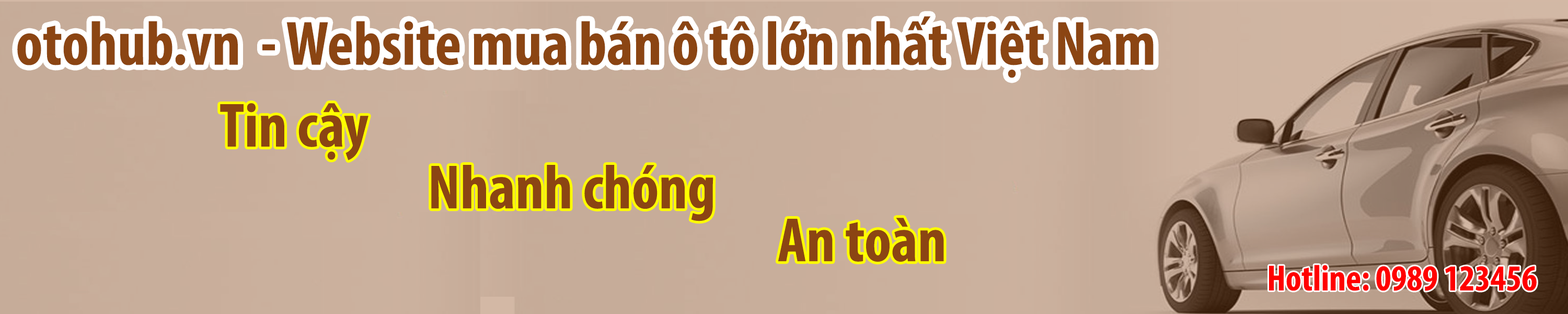
<style>
.page{position:relative;width:1568px;height:314px}
.page>*{position:absolute;margin:0}
.t1{font:62.7px "MyriadPro-BoldCond";color:#8b4513}
.t2{font:36.6px "MyriadPro-BoldCond";color:#ff0000}
</style>
<div class="page">
<p class="t1" style="left:17px;top:16px;width:1137px;height:62px">otohub.vn  - Website mua bán ô tô lớn nhất Việt Nam</p>
<p class="t1" style="left:220px;top:103px;width:148px;height:57px">Tin cậy</p>
<p class="t1" style="left:431px;top:165px;width:282px;height:56px">Nhanh chóng</p>
<p class="t1" style="left:778px;top:217px;width:166px;height:45px">An toàn</p>
<p class="t2" style="left:1269px;top:264px;width:268px;height:27px">Hotline: 0989 123456</p>
</div>
